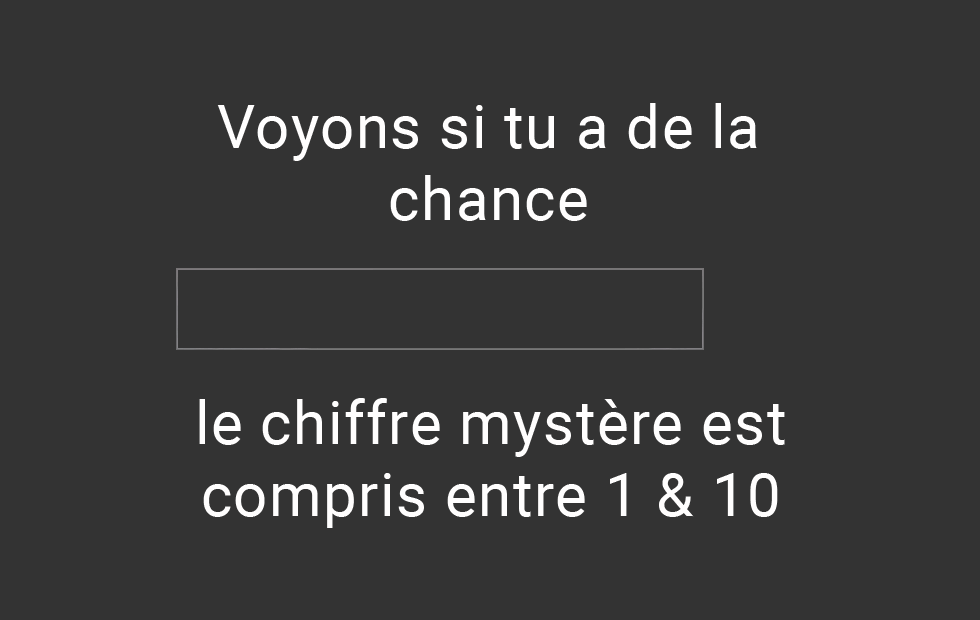
<style>
.page{position:relative;width:980px;height:620px;background:#333333}
.page>*{position:absolute;margin:0}
.t1{font:60px "Roboto-Regular";letter-spacing:0.025em;color:#fffefe}
</style>
<div class="page">
<p class="t1" style="left:217px;top:103px;width:540px;height:118px;text-align:center">Voyons si tu a de la chance</p>
<p class="t1" style="left:199px;top:398px;width:586px;height:130px;text-align:center">le chiffre mystère est compris entre 1 &amp; 10</p>
</div>
